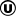
<style>
.page{position:relative;width:16px;height:16px;background:#ffffff}
.page>*{position:absolute;margin:0}
.t1{font:12px "Arial-Black";color:#000000}
</style>
<div class="page">
<p class="t1" style="left:4px;top:4px;width:8px;height:9px">U</p>
</div>
